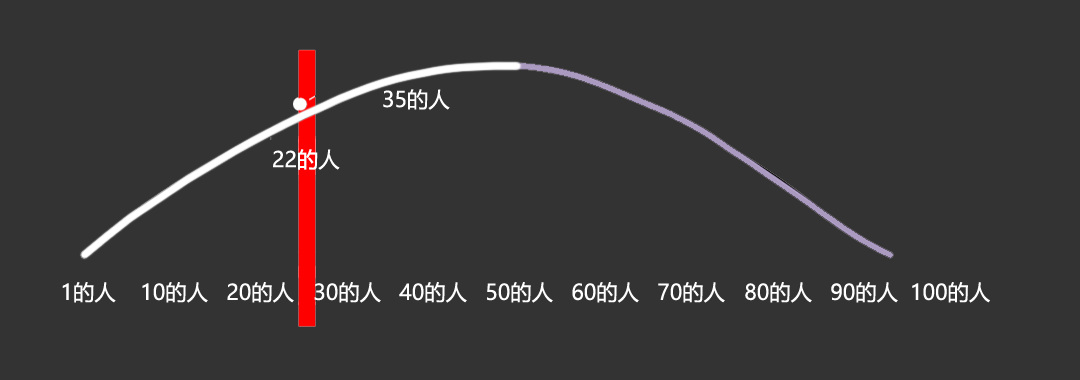
<style>
.page{position:relative;width:1080px;height:380px;background:#333333}
.page>*{position:absolute;margin:0}
.t1{font:21.3px "MicrosoftYaHei";color:#ffffff}
</style>
<div class="page">
<p class="t1" style="left:383px;top:89px;width:67px;height:21px">35的人</p>
<p class="t1" style="left:273px;top:149px;width:67px;height:21px">22的人</p>
<p class="t1" style="left:62px;top:282px;width:54px;height:21px">1的人</p>
<p class="t1" style="left:142px;top:282px;width:66px;height:21px">10的人</p>
<p class="t1" style="left:227px;top:282px;width:67px;height:21px">20的人</p>
<p class="t1" style="left:314px;top:282px;width:67px;height:21px">30的人</p>
<p class="t1" style="left:399px;top:282px;width:68px;height:21px">40的人</p>
<p class="t1" style="left:487px;top:282px;width:66px;height:21px">50的人</p>
<p class="t1" style="left:572px;top:282px;width:67px;height:21px">60的人</p>
<p class="t1" style="left:658px;top:282px;width:67px;height:21px">70的人</p>
<p class="t1" style="left:745px;top:282px;width:67px;height:21px">80的人</p>
<p class="t1" style="left:831px;top:282px;width:67px;height:21px">90的人</p>
<p class="t1" style="left:912px;top:282px;width:78px;height:21px">100的人</p>
</div>
